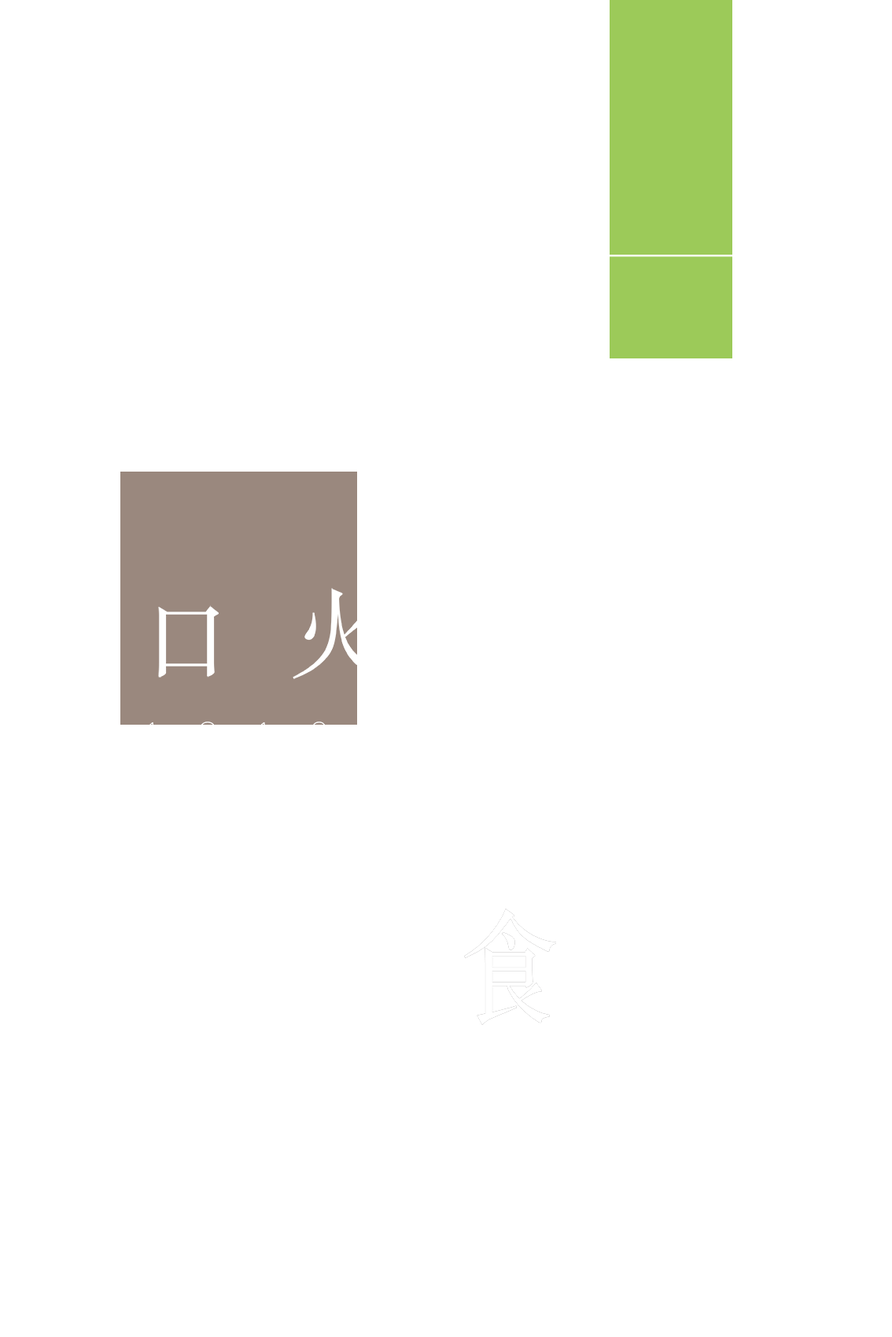
<style>
.page{position:relative;width:892px;height:1337px;background:#ffffff}
.page>*{position:absolute;margin:0}
.t1{font:98.3px "STSongti-TC-Regular";letter-spacing:3.676em;color:#ffffff}
.t2{font:90.4px "STSongti-TC-Regular";letter-spacing:3.676em;color:#ffffff}
</style>
<div class="page">
<p class="t1" style="left:292px;top:588px;width:88px;height:91px">火</p>
<p class="t2" style="left:158px;top:605px;width:61px;height:73px">口</p>
</div>
